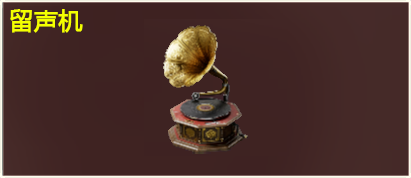
<style>
.page{position:relative;width:411px;height:178px}
.page>*{position:absolute;margin:0}
.t1{font:24px "MicrosoftYaHeiUI";color:#f4ff00;font-weight:bold}
</style>
<div class="page">
<p class="t1" style="left:10px;top:9px;width:73px;height:24px">留声机</p>
</div>
